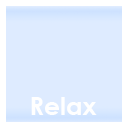
<style>
.page{position:relative;width:128px;height:128px;background:#deebff}
.page>*{position:absolute;margin:0}
.t1{font:25px "CenturyGothic-Bold";color:#ffffff}
</style>
<div class="page">
<p class="t1" style="left:31px;top:97px;width:66px;height:18px">Relax</p>
</div>
